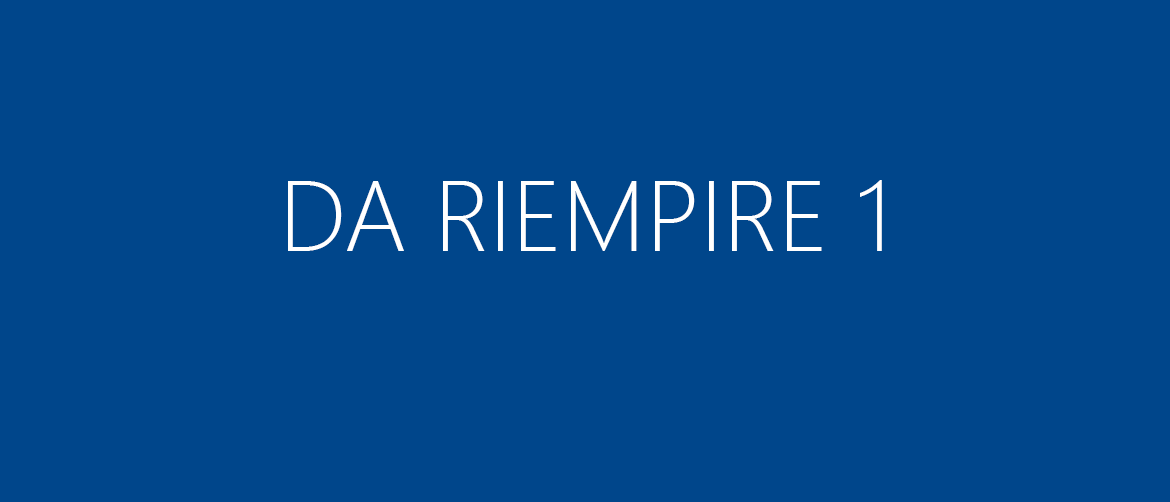
<style>
.page{position:relative;width:1170px;height:502px;background:#00468b}
.page>*{position:absolute;margin:0}
.t1{font:100px "SegoeUI-Light";color:#ffffff}
</style>
<div class="page">
<p class="t1" style="left:288px;top:180px;width:594px;height:71px">DA RIEMPIRE 1</p>
</div>
